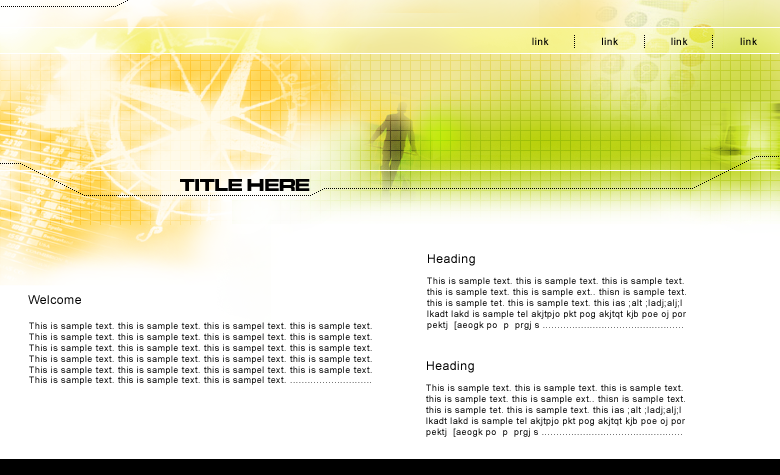
<style>
.page{position:relative;width:780px;height:475px;background:#ffffff}
.page>*{position:absolute;margin:0}
.t1{font:10px "ArialMT";letter-spacing:0.05em;color:#000000}
.t2{font:18px "MicrogrammaD-BoldExte";color:#000000}
.t3{font:12px "ArialMT";letter-spacing:0.05em;color:#000000}
.t4{font:9px "ArialMT";letter-spacing:0.05em;color:#000000}
</style>
<div class="page">
<p class="t1" style="left:532px;top:37px;width:225px;height:8px">link                link                link                link</p>
<p class="t2" style="left:180px;top:179px;width:130px;height:12px">TITLE HERE</p>
<p class="t3" style="left:428px;top:254px;width:47px;height:12px">Heading</p>
<p class="t4" style="left:427px;top:277px;width:259px;height:53px">This is sample text. this is sample text. this is sample text.<br>this is sample text. this is sample ext.. thisn is sample text.<br>this is sample tet. this is sample text. this ias ;alt ;ladj;alj;l<br>lkadt lakd is sample tel akjtpjo pkt pog akjtqt kjb poe oj por<br>pektj  [aeogk po  p  prgj s ................................................</p>
<p class="t3" style="left:28px;top:295px;width:53px;height:9px">Welcome</p>
<p class="t4" style="left:29px;top:322px;width:343px;height:63px">This is sample text. this is sample text. this is sampel text. this is sample text.<br>This is sample text. this is sample text. this is sampel text. this is sample text.<br>This is sample text. this is sample text. this is sampel text. this is sample text.<br>This is sample text. this is sample text. this is sampel text. this is sample text.<br>This is sample text. this is sample text. this is sampel text. this is sample text.<br>This is sample text. this is sample text. this is sampel text. ............................</p>
<p class="t3" style="left:427px;top:361px;width:47px;height:12px">Heading</p>
<p class="t4" style="left:426px;top:384px;width:259px;height:53px">This is sample text. this is sample text. this is sample text.<br>this is sample text. this is sample ext.. thisn is sample text.<br>this is sample tet. this is sample text. this ias ;alt ;ladj;alj;l<br>lkadt lakd is sample tel akjtpjo pkt pog akjtqt kjb poe oj por<br>pektj  [aeogk po  p  prgj s ................................................</p>
</div>
